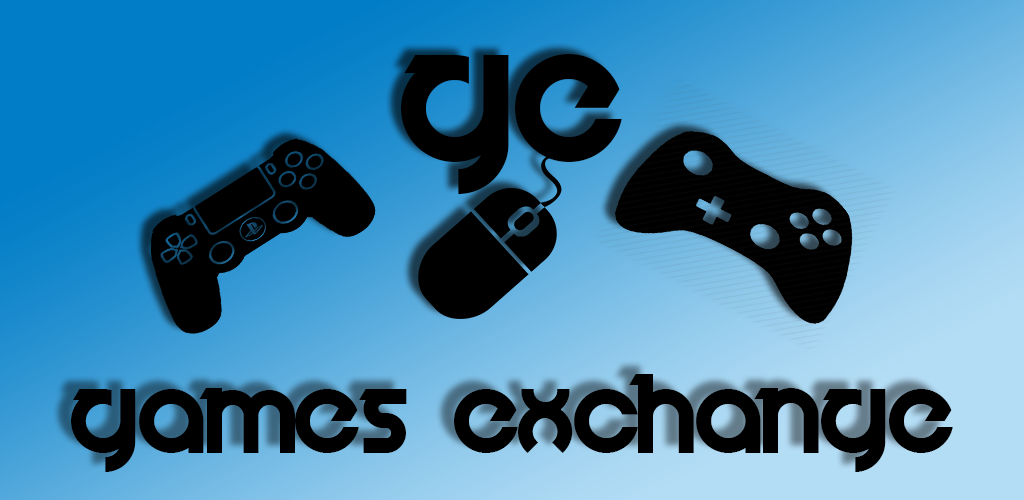
<style>
.page{position:relative;width:1024px;height:500px}
.page>*{position:absolute;margin:0}
.t1{font:154.2px "Velocity";color:#000000}
.t2{font:91.7px "Velocity";color:#000000}
</style>
<div class="page">
<p class="t1" style="left:401px;top:54px;width:221px;height:140px">GE</p>
<p class="t2" style="left:71px;top:374px;width:882px;height:98px">Games Exchange</p>
</div>
